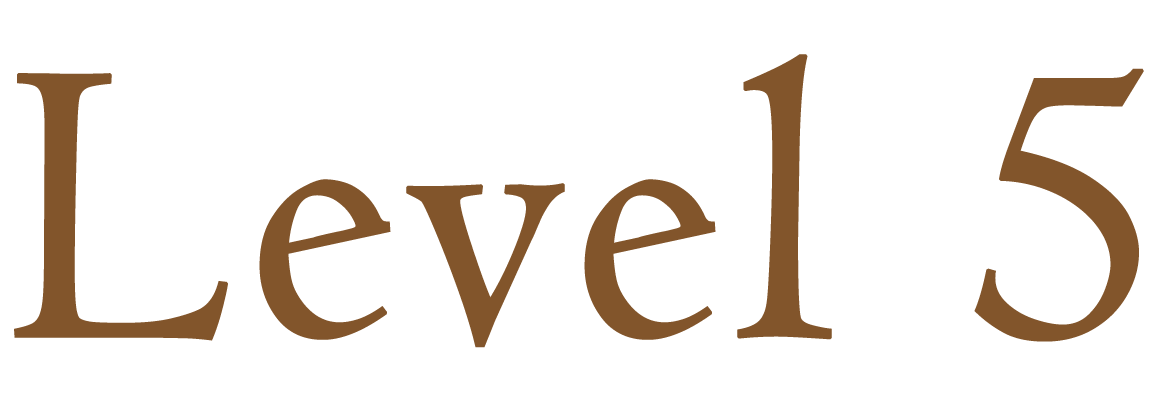
<style>
.page{position:relative;width:1170px;height:398px;background:#ffffff}
.page>*{position:absolute;margin:0}
.t1{font:416.7px "Centaur";color:#82552b;font-weight:bold}
</style>
<div class="page">
<p class="t1" style="left:14px;top:54px;width:1130px;height:294px">Level 5</p>
</div>
